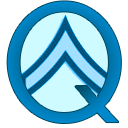
<style>
.page{position:relative;width:128px;height:128px;background:#ffffff}
.page>*{position:absolute;margin:0}
.t1{font:167.6px "Raleway";color:#007ebb}
</style>
<div class="page">
<p class="t1" style="left:7px;top:1px;width:114px;height:122px">Q</p>
</div>
